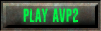
<style>
.page{position:relative;width:101px;height:31px}
.page>*{position:absolute;margin:0}
.t1{font:19px "Sunzoomspark";color:#00f646}
</style>
<div class="page">
<p class="t1" style="left:23px;top:8px;width:55px;height:15px">PLAY AVP2</p>
</div>
